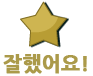
<style>
.page{position:relative;width:93px;height:76px;background:#ffffff}
.page>*{position:absolute;margin:0}
.t1{font:20px "NanumGothicExtraBold";color:#ab9a4a;font-weight:bold}
</style>
<div class="page">
<p class="t1" style="left:3px;top:54px;width:84px;height:20px">잘했어요!</p>
</div>
